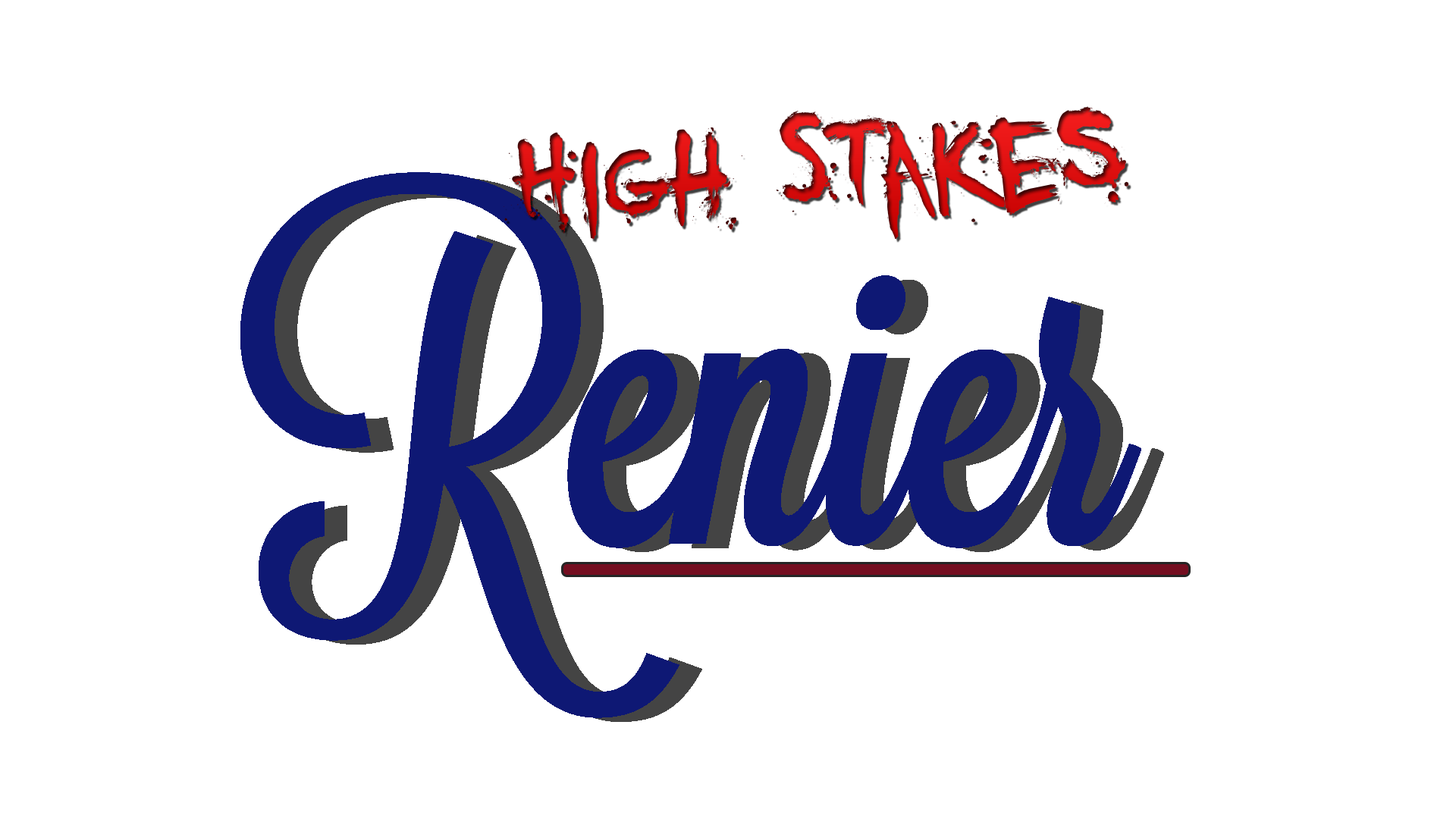
<style>
.page{position:relative;width:1456px;height:819px;background:#ffffff}
.page>*{position:absolute;margin:0}
.t1{font:177.2px "YouMurdererBB"}
.t2{font:415.9px "Lavanderia-Sturdy";color:#0e1874}
.t3{font:415.9px "Lavanderia-Sturdy"}
</style>
<div class="page">
<p class="t1" style="left:504px;top:106px;width:625px;height:133px;rotate:-2deg">High Stakes</p>
<p class="t2" style="left:240px;top:172px;width:901px;height:546px">Renier</p>
<p class="t3" style="left:263px;top:177px;width:901px;height:545px">Renier</p>
</div>
